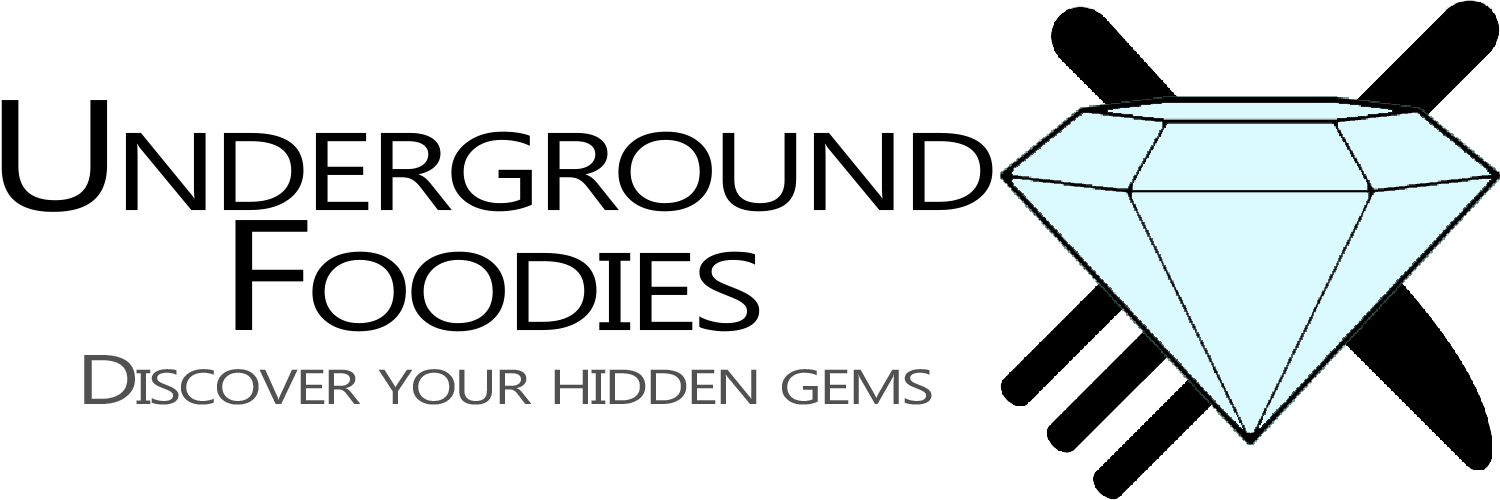
<style>
.page{position:relative;width:1500px;height:500px;background:#ffffff}
.page>*{position:absolute;margin:0}
.t1{font:156.8px/120px "Ebrima";letter-spacing:-0.05em;color:#000000;font-variant:small-caps;scale:1.29 1}
.t2{font:70px "Ebrima";letter-spacing:-0.05em;color:#515151;font-variant:small-caps;scale:1.29 1}
</style>
<div class="page">
<p class="t1" style="left:1px;top:100px;width:992px;height:232px;text-align:center">Underground<br>Foodies</p>
<p class="t2" style="left:84px;top:355px;width:848px;height:50px">Discover your hidden gems</p>
</div>
